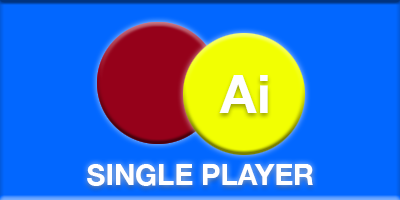
<style>
.page{position:relative;width:400px;height:200px;background:#0267ff}
.page>*{position:absolute;margin:0}
.t1{font:53.4px "HelveticaNeue-Bold";color:#ffffff}
.t2{font:28.9px "HelveticaNeue-Bold";color:#ffffff}
</style>
<div class="page">
<p class="t1" style="left:219px;top:75px;width:49px;height:38px">Ai</p>
<p class="t2" style="left:87px;top:164px;width:226px;height:22px">SINGLE PLAYER</p>
</div>
